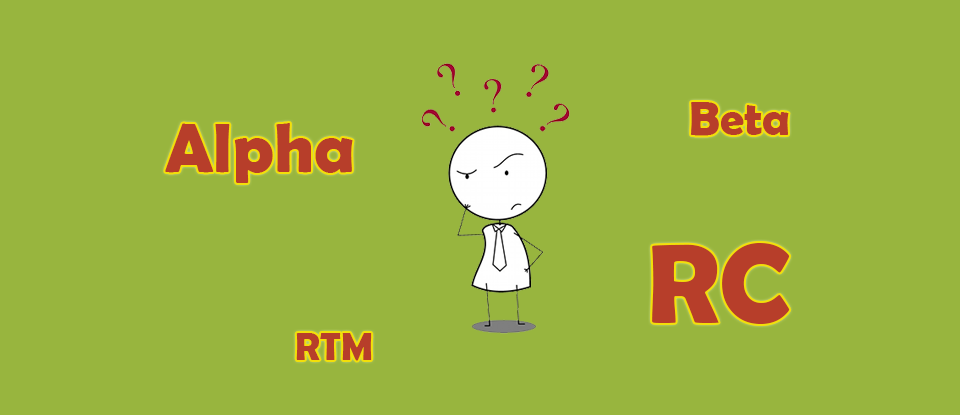
<style>
.page{position:relative;width:960px;height:415px;background:#98b53e}
.page>*{position:absolute;margin:0}
.t1{font:48px "BerlinSansFBDemi-Bold";color:#b73e2a}
.t2{font:69.9px "BerlinSansFBDemi-Bold";color:#b73e2a}
.t3{font:113.9px "BerlinSansFBDemi-Bold";color:#b73e2a}
.t4{font:39.1px "BerlinSansFBDemi-Bold";color:#b73e2a}
</style>
<div class="page">
<p class="t1" style="left:691px;top:102px;width:98px;height:34px">Beta</p>
<p class="t2" style="left:165px;top:123px;width:188px;height:60px">Alpha</p>
<p class="t3" style="left:652px;top:243px;width:138px;height:81px">RC</p>
<p class="t4" style="left:296px;top:333px;width:76px;height:28px">RTM</p>
</div>
